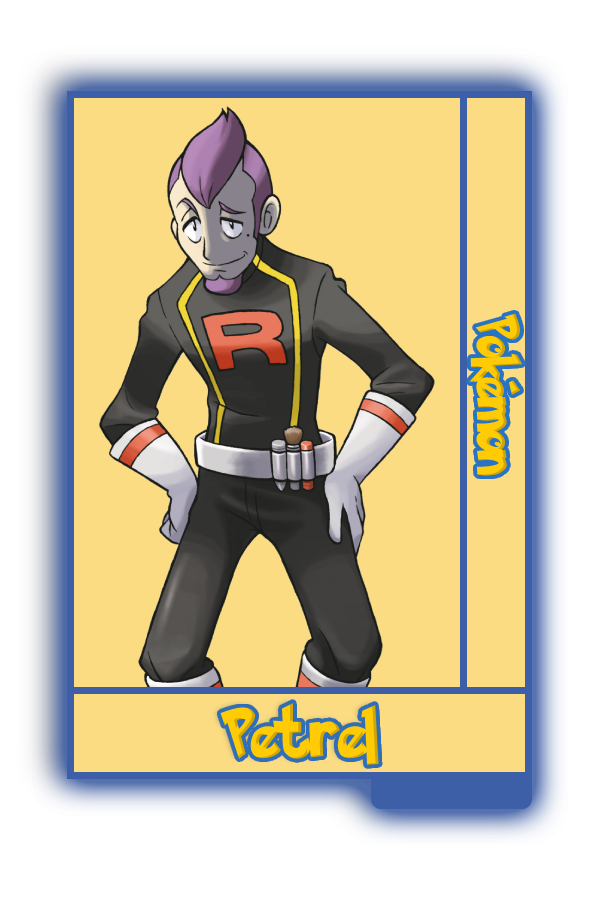
<style>
.page{position:relative;width:600px;height:900px;background:#fbdc83}
.page>*{position:absolute;margin:0}
.t1{font:48.8px "PokemonSolidNormal";color:#ffcb05;scale:0.8 1}
.t2{font:56.6px "PokemonSolidNormal";color:#ffcb05;scale:0.92 1}
</style>
<div class="page">
<p class="t1" style="left:469px;top:313px;width:54px;height:163px;rotate:90deg">Pokémon</p>
<p class="t2" style="left:220px;top:703px;width:159px;height:62px">Petrel</p>
</div>
